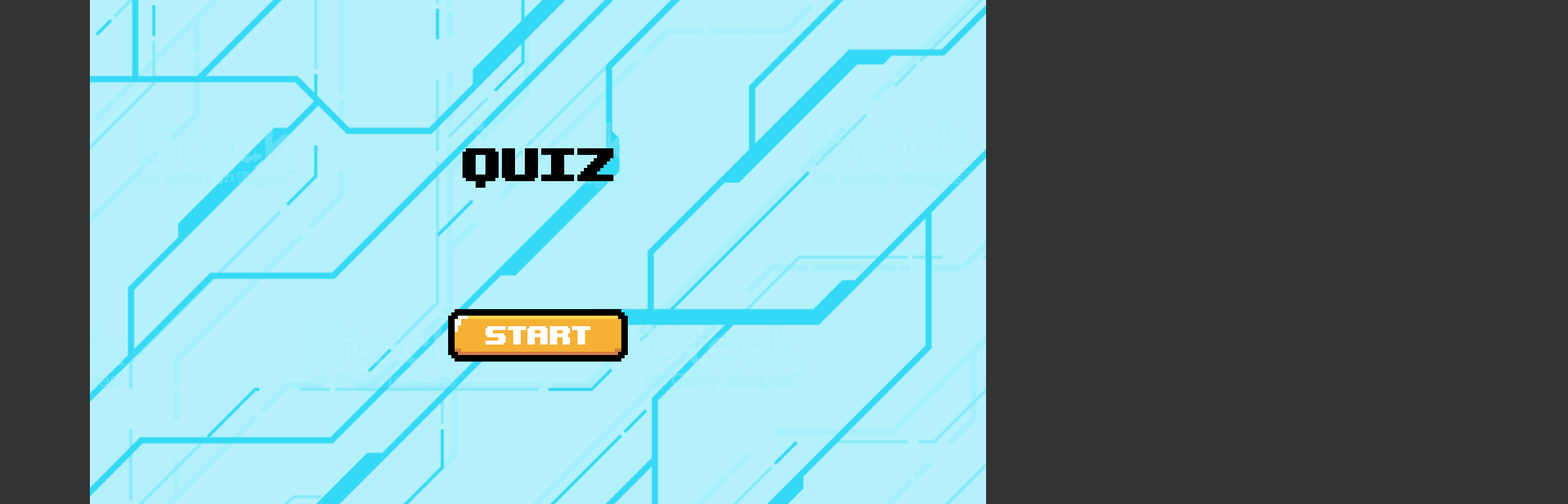
<style>
.page{position:relative;width:1568px;height:504px;background:#333333}
.page>*{position:absolute;margin:0}
.t1{font:65.6px "UpheavalTT-BRK-";color:#010101}
.t2{font:36.9px "UpheavalTT-BRK-";color:#ffffff}
</style>
<div class="page">
<p class="t1" style="left:463px;top:148px;width:150px;height:40px">quiz</p>
<p class="t2" style="left:485px;top:326px;width:105px;height:18px">start</p>
</div>
